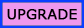
<style>
.page{position:relative;width:84px;height:28px;background:#ee98ed}
.page>*{position:absolute;margin:0}
.t1{font:14px "Verdana";color:#000000;font-weight:bold}
</style>
<div class="page">
<p class="t1" style="left:7px;top:9px;width:70px;height:11px">UPGRADE</p>
</div>
